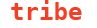
<style>
.page{position:relative;width:97px;height:28px;background:#ffffff}
.page>*{position:absolute;margin:0}
.t1{font:12px "Menlo-Bold";color:#f43e25}
</style>
<div class="page">
<p class="t1" style="left:11px;top:0px;width:71px;height:20px">tribe</p>
</div>
